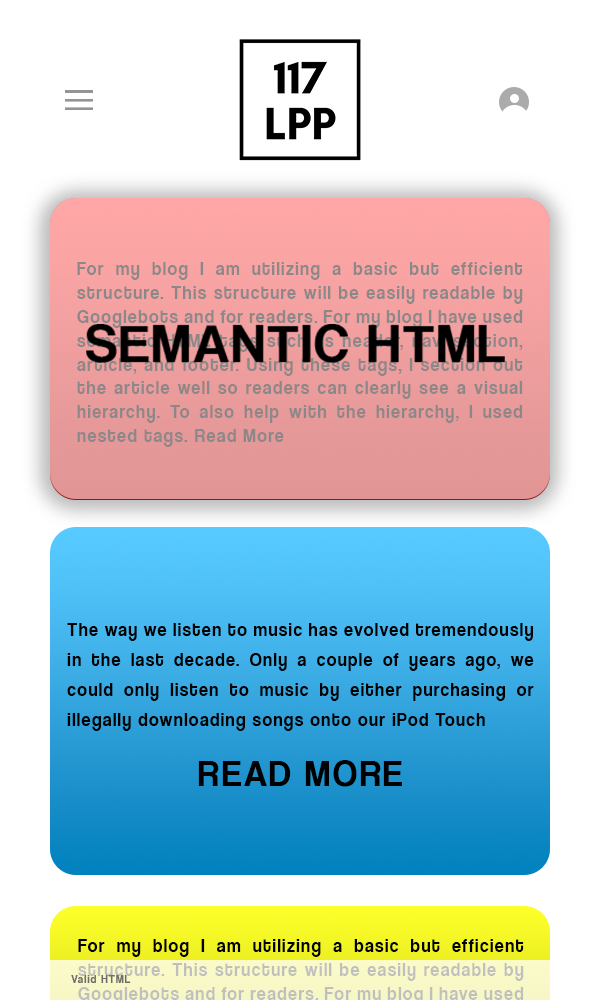
<style>
.page{position:relative;width:600px;height:1000px;background:#ffffff}
.page>*{position:absolute;margin:0}
.t1{font:18.9px/23.8px "CoolveticaRg-Regular";letter-spacing:0.075em;color:#8a8888;scale:0.95 1}
.t2{font:18.9px/30px "CoolveticaRg-Regular";letter-spacing:0.075em;color:#000000;scale:0.95 1}
.t3{font:37.8px/30px "CoolveticaRg-Regular";letter-spacing:0.075em;color:#000000;scale:0.95 1}
.t4{font:11px "CoolveticaRg-Regular";letter-spacing:0.1em;color:#6c6c6c}
</style>
<div class="page">
<p class="t1" style="left:77px;top:262px;width:446px;height:185px;text-align:justify">For my blog I am utilizing a basic but efficient structure. This structure will be easily readable by Googlebots and for readers. For my blog I have used semantic HTML tags such as header, nav, section, article, and footer. Using these tags, I section out the article well so readers can clearly see a visual hierarchy. To also help with the hierarchy, I used nested tags. Read More</p>
<p class="t2" style="left:67px;top:623px;width:467px;height:164px;text-align:justify">The way we listen to music has evolved tremendously in the last decade. Only a couple of years ago, we could only listen to music by either purchasing or illegally downloading songs onto our iPod Touch <br><br><span class="t3">READ MORE</span></p>
<p class="t4" style="left:71px;top:975px;width:60px;height:8px">Valid HTML</p>
</div>
